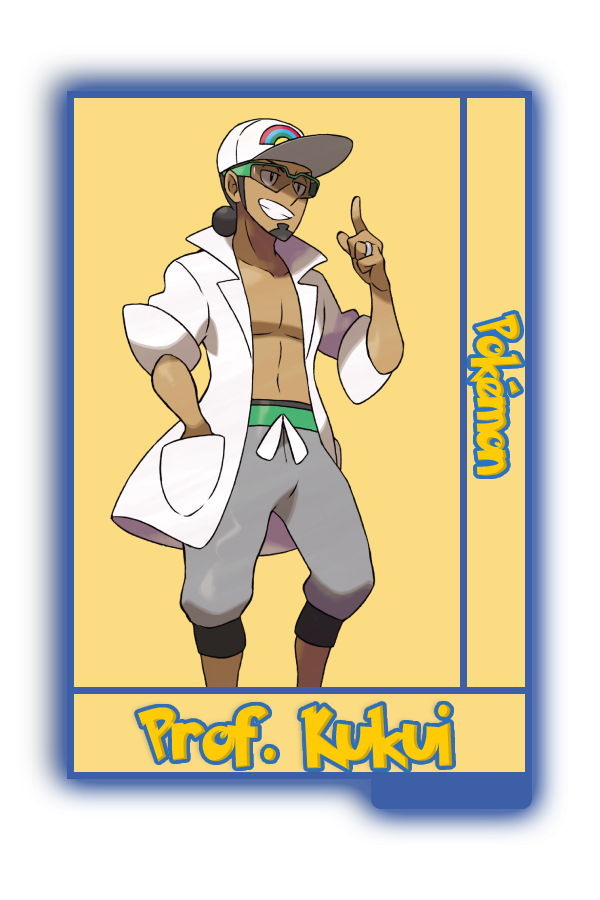
<style>
.page{position:relative;width:600px;height:900px;background:#fbdc83}
.page>*{position:absolute;margin:0}
.t1{font:48.8px "PokemonSolidNormal";color:#ffcb05;scale:0.8 1}
.t2{font:60.1px "PokemonSolidNormal";color:#ffcb05;scale:0.96 1}
</style>
<div class="page">
<p class="t1" style="left:469px;top:313px;width:54px;height:163px;rotate:90deg">Pokémon</p>
<p class="t2" style="left:137px;top:704px;width:316px;height:67px">Prof. Kukui</p>
</div>
